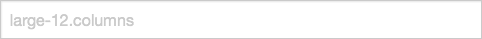
<style>
.page{position:relative;width:482px;height:39px;background:#ffffff}
.page>*{position:absolute;margin:0}
.t1{font:12px "MyriadPro-Regular";color:#cacaca}
</style>
<div class="page">
<p class="t1" style="left:10px;top:14px;width:124px;height:16px">large-12.columns</p>
</div>
